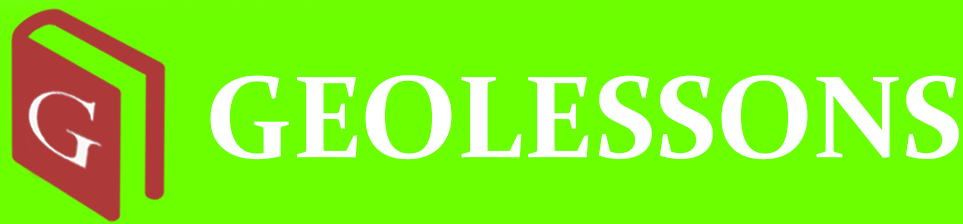
<style>
.page{position:relative;width:963px;height:224px;background:#6cff00}
.page>*{position:absolute;margin:0}
.t1{font:116.6px "Constantia-Bold";color:#ffffff;text-transform:uppercase}
</style>
<div class="page">
<p class="t1" style="left:210px;top:75px;width:749px;height:85px">GeoLessons</p>
</div>
